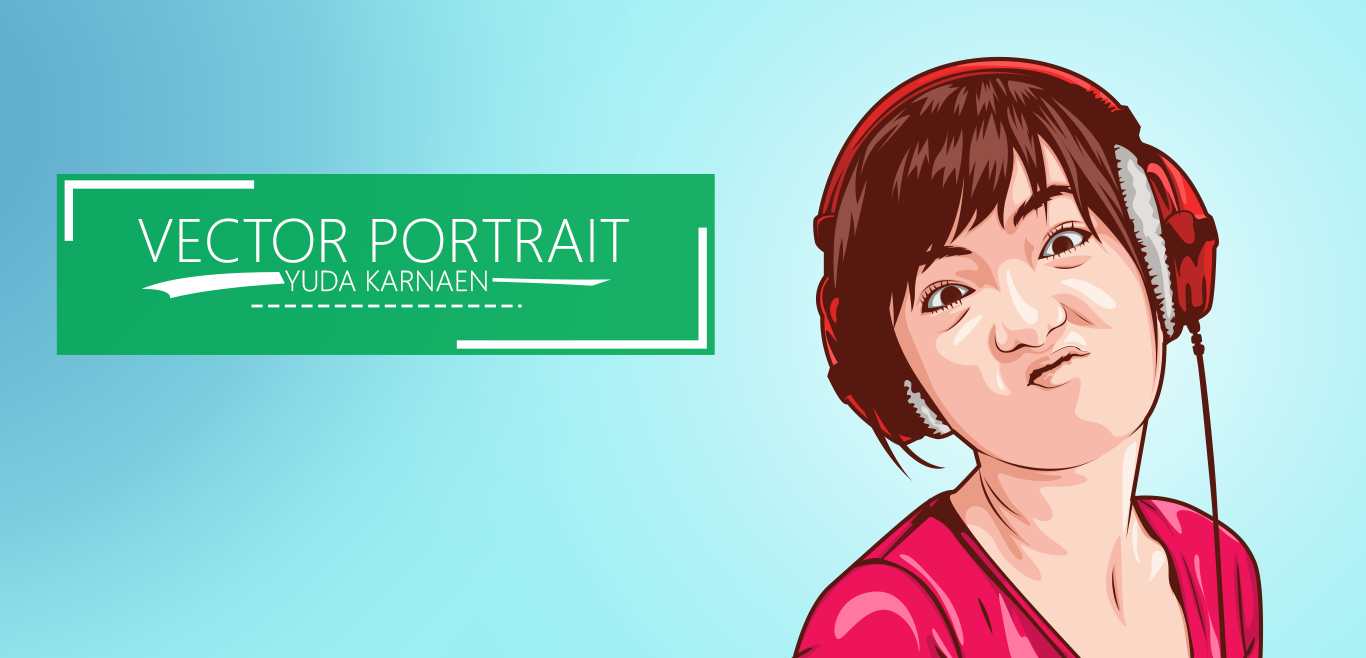
<style>
.page{position:relative;width:1366px;height:658px}
.page>*{position:absolute;margin:0}
.t1{font:61.2px "SegoeUI-Light";color:#ffffff}
.t2{font:28.6px "SegoeUI-Light";color:#ffffff}
</style>
<div class="page">
<p class="t1" style="left:138px;top:218px;width:491px;height:45px">VECTOR PORTRAIT</p>
<p class="t2" style="left:285px;top:270px;width:202px;height:22px">YUDA KARNAEN</p>
</div>
